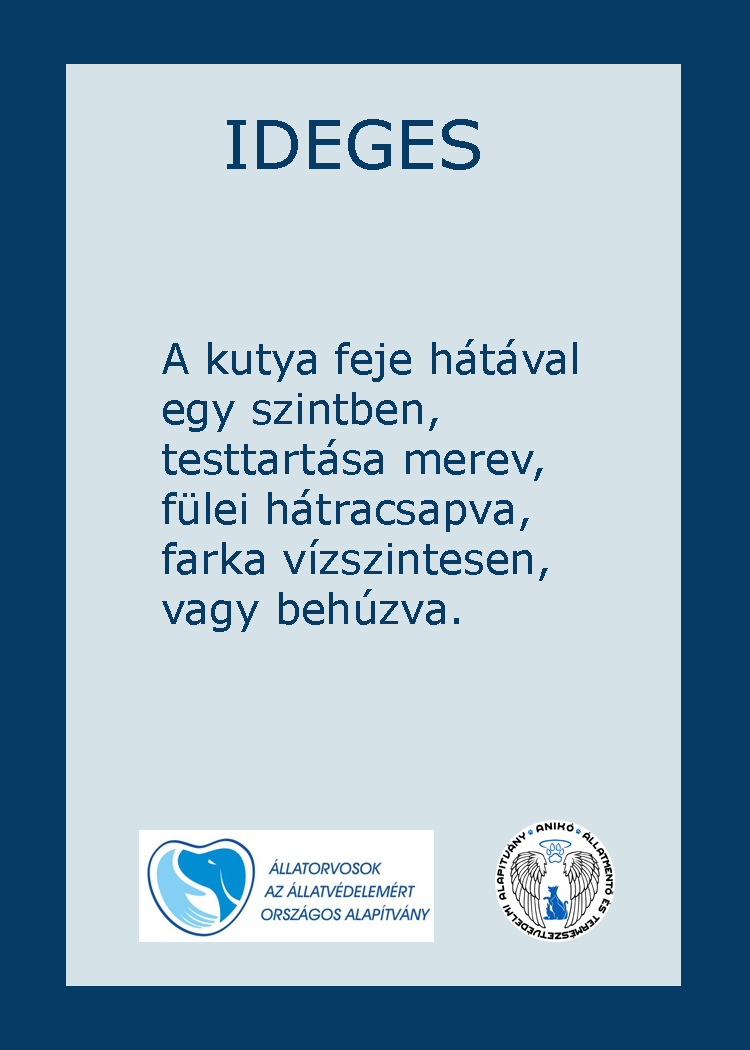
<style>
.page{position:relative;width:750px;height:1050px;background:#d5e2e7}
.page>*{position:absolute;margin:0}
.t1{font:66.7px "Verdana";color:#053b65}
.t2{font:66.7px "GravitateBRK";color:#053b65}
.t3{font:41.7px "Verdana";color:#053b65}
</style>
<div class="page">
<p class="t1" style="left:227px;top:119px;width:253px;height:51px"><span class="t2">        </span>IDEGES</p>
<p class="t3" style="left:162px;top:339px;width:415px;height:293px">A kutya feje hátával<br>egy szintben,<br>testtartása merev,<br>fülei hátracsapva,<br>farka vízszintesen,<br>vagy behúzva.</p>
</div>
